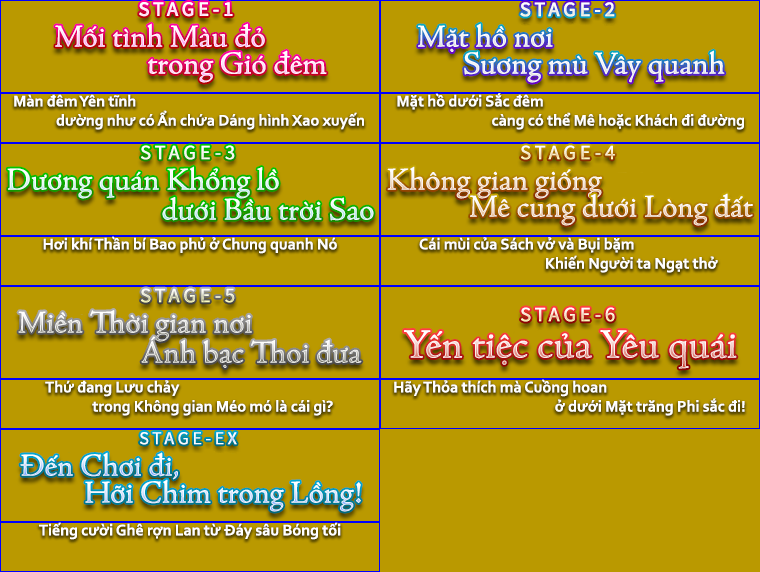
<style>
.page{position:relative;width:760px;height:572px;background:#ba9900}
.page>*{position:absolute;margin:0}
.t1{font:32px "SVN-AdobeJenson"}
.t2{font:32px "SVN-AdobeJenson";color:#ffffff}
.t3{font:32px "SVN-AdobeJenson";color:#ffeafd}
.t4{font:16px "Corbel-Bold";color:#ffffff}
.t5{font:42px "SVN-AdobeJenson"}
</style>
<div class="page">
<p class="t1" style="left:55px;top:23px;width:210px;height:25px">Mối tình Màu đỏ</p>
<p class="t2" style="left:418px;top:23px;width:135px;height:29px">Mặt hồ nơi</p>
<p class="t3" style="left:148px;top:50px;width:179px;height:33px">trong Gió đêm</p>
<p class="t2" style="left:464px;top:50px;width:261px;height:33px">Sương mù Vây quanh</p>
<p class="t4" style="left:14px;top:94px;width:350px;height:36px">Màn đêm Yên tĩnh<br>                 dường như có Ẩn chứa Dáng hình Xao xuyến</p>
<p class="t4" style="left:397px;top:93px;width:347px;height:37px">Mặt hồ dưới Sắc đêm<br>              càng có thể Mê hoặc Khách đi đường</p>
<p class="t2" style="left:7px;top:166px;width:272px;height:33px">Dương quán Khổng lồ</p>
<p class="t1" style="left:387px;top:166px;width:215px;height:33px">Không gian giống</p>
<p class="t1" style="left:162px;top:197px;width:212px;height:24px">dưới Bầu trời Sao</p>
<p class="t1" style="left:470px;top:193px;width:283px;height:33px">Mê cung dưới Lòng đất</p>
<p class="t4" style="left:43px;top:236px;width:294px;height:18px">Hơi khí Thần bí Bao phủ ở Chung quanh Nó</p>
<p class="t4" style="left:419px;top:237px;width:299px;height:36px">Cái mùi của Sách vở và Bụi bặm<br>                                                  Khiến Người ta Ngạt thở</p>
<p class="t1" style="left:18px;top:310px;width:234px;height:32px">Miền Thời gian nơi</p>
<p class="t1" style="left:141px;top:336px;width:221px;height:32px">Ánh bạc Thoi đưa</p>
<p class="t5" style="left:404px;top:330px;width:333px;height:39px">Yến tiệc của Yêu quái</p>
<p class="t4" style="left:45px;top:380px;width:288px;height:36px">Thứ đang Lưu chảy<br>                            trong Không gian Méo mó là cái gì?</p>
<p class="t4" style="left:394px;top:379px;width:351px;height:37px">Hãy Thỏa thích mà Cuồng hoan<br>                                                     ở dưới Mặt trăng Phi sắc đi!</p>
<p class="t1" style="left:20px;top:452px;width:158px;height:28px">Đến Chơi đi,</p>
<p class="t1" style="left:85px;top:479px;width:276px;height:33px">Hỡi Chim trong Lồng!</p>
<p class="t4" style="left:39px;top:522px;width:302px;height:18px">Tiếng cười Ghê rợn Lan từ Đáy sâu Bóng tối</p>
</div>
